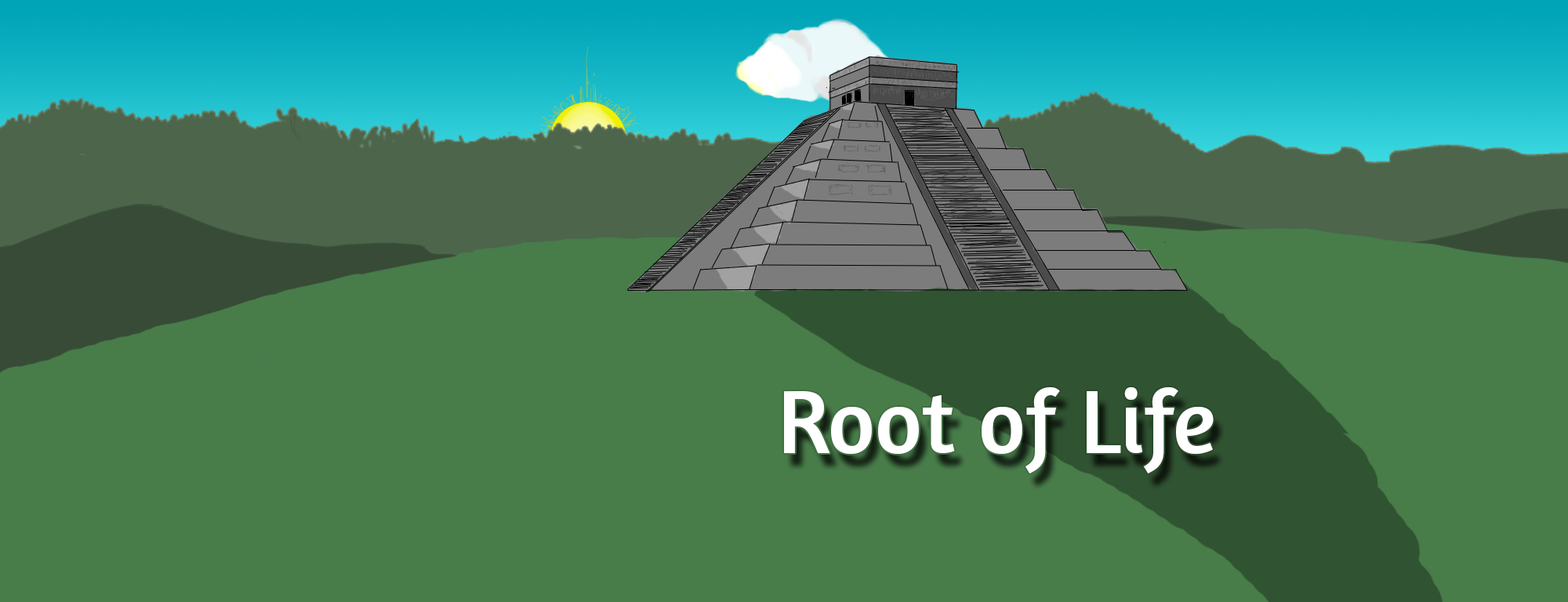
<style>
.page{position:relative;width:1568px;height:602px;background:#487d4a}
.page>*{position:absolute;margin:0}
.t1{font:91px "Amaranth";color:#ffffff}
</style>
<div class="page">
<p class="t1" style="left:784px;top:387px;width:430px;height:87px">Root of Life</p>
</div>
